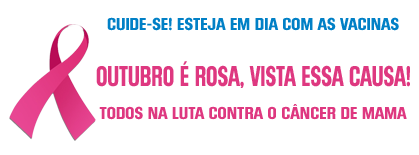
<style>
.page{position:relative;width:419px;height:155px;background:#ffffff}
.page>*{position:absolute;margin:0}
.t1{font:17.3px "MailunaProAOEBold-Regular";color:#0180c6}
.t2{font:28.4px "MailunaProAOEBold-Regular";color:#de3880;scale:0.75 1}
.t3{font:17.3px "MailunaProAOEBold-Regular";color:#de3880}
</style>
<div class="page">
<p class="t1" style="left:107px;top:17px;width:292px;height:14px">CUIDE-SE! ESTEJA EM DIA COM AS VACINAS</p>
<p class="t2" style="left:96px;top:61px;width:314px;height:27px">OUTUBRO É ROSA, VISTA ESSA CAUSA!</p>
<p class="t3" style="left:99px;top:104px;width:308px;height:16px">TODOS NA LUTA CONTRA O CÂNCER DE MAMA</p>
</div>
